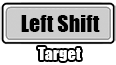
<style>
.page{position:relative;width:116px;height:65px;background:#ffffff}
.page>*{position:absolute;margin:0}
.t1{font:21.9px "Impact";color:#000000}
.t2{font:16.4px "Impact";color:#ffffff}
</style>
<div class="page">
<p class="t1" style="left:21px;top:15px;width:79px;height:17px">Left Shift</p>
<p class="t2" style="left:38px;top:47px;width:43px;height:14px">Target</p>
</div>
